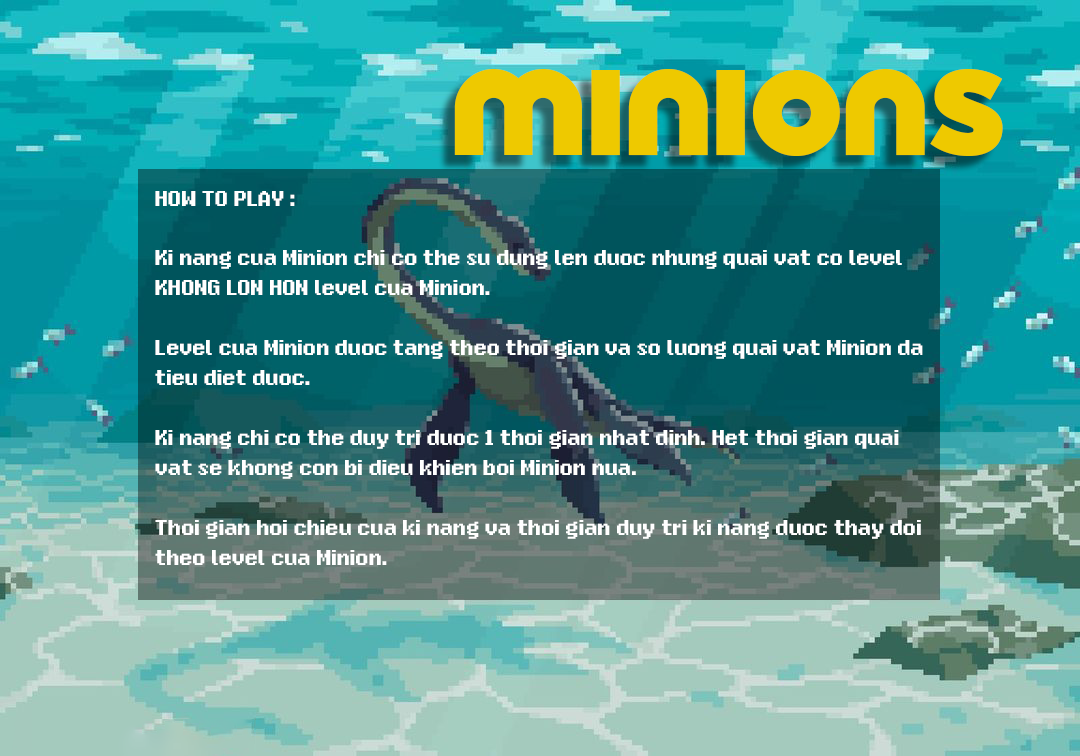
<style>
.page{position:relative;width:1080px;height:756px}
.page>*{position:absolute;margin:0}
.t1{font:30px "Nihonium113";color:#ffffff}
.t2{font:30px/30px "Nihonium113";color:#ffffff}
</style>
<div class="page">
<p class="t1" style="left:155px;top:191px;width:140px;height:15px">HOW TO PLAY :</p>
<p class="t2" style="left:155px;top:250px;width:768px;height:315px">Ki nang cua Minion chi co the su dung len duoc nhung quai vat co level KHONG LON HON level cua Minion.<br><br>Level cua Minion duoc tang theo thoi gian va so luong quai vat Minion da tieu diet duoc.<br><br>Ki nang chi co the duy tri duoc 1 thoi gian nhat dinh. Het thoi gian quai vat se khong con bi dieu khien boi Minion nua.<br><br>Thoi gian hoi chieu cua ki nang va thoi gian duy tri ki nang duoc thay doi theo level cua Minion.</p>
</div>
